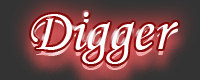
<style>
.page{position:relative;width:200px;height:80px}
.page>*{position:absolute;margin:0}
.t1{font:60px "MonotypeCorsiva"}
</style>
<div class="page">
<p class="t1" style="left:31px;top:18px;width:147px;height:52px">Digger</p>
</div>
